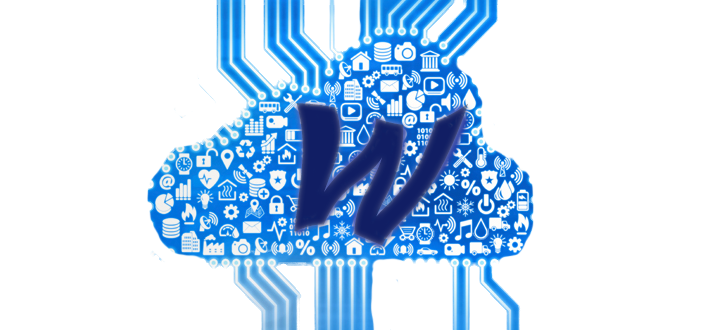
<style>
.page{position:relative;width:702px;height:330px;background:#ffffff}
.page>*{position:absolute;margin:0}
.t1{font:216px "MyriadPro-BoldIt";color:#132165}
</style>
<div class="page">
<p class="t1" style="left:294px;top:103px;width:174px;height:142px">W</p>
</div>
